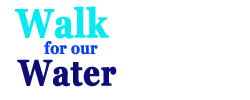
<style>
.page{position:relative;width:250px;height:100px;background:#ffffff}
.page>*{position:absolute;margin:0}
.t1{font:40px "Georgia-Bold";color:#07eaf2;font-weight:bold;scale:0.82 1}
.t2{font:17px "Georgia-Bold";color:#0944ec;font-weight:bold;scale:0.82 1}
.t3{font:36px "Georgia-Bold";color:#0d0d7a;font-weight:bold;scale:0.82 1}
</style>
<div class="page">
<p class="t1" style="left:15px;top:6px;width:94px;height:33px">Walk</p>
<p class="t2" style="left:44px;top:41px;width:54px;height:14px">for our</p>
<p class="t3" style="left:17px;top:59px;width:100px;height:28px">Water</p>
</div>
